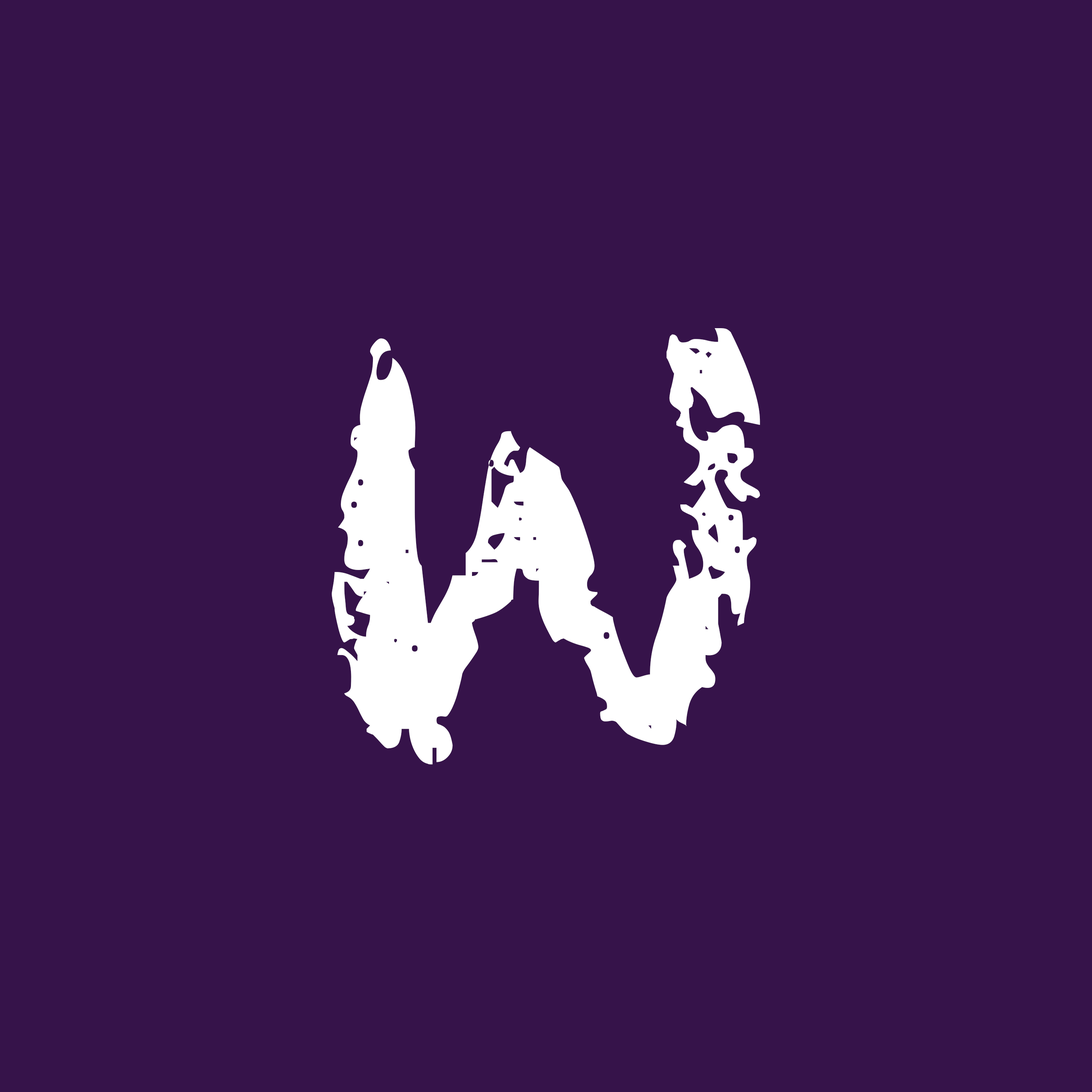
<style>
.page{position:relative;width:1092px;height:1092px;background:#36134a}
.page>*{position:absolute;margin:0}
.t1{font:518px "Chalkduster";color:#ffffff}
</style>
<div class="page">
<p class="t1" style="left:331px;top:328px;width:429px;height:437px">W</p>
</div>
